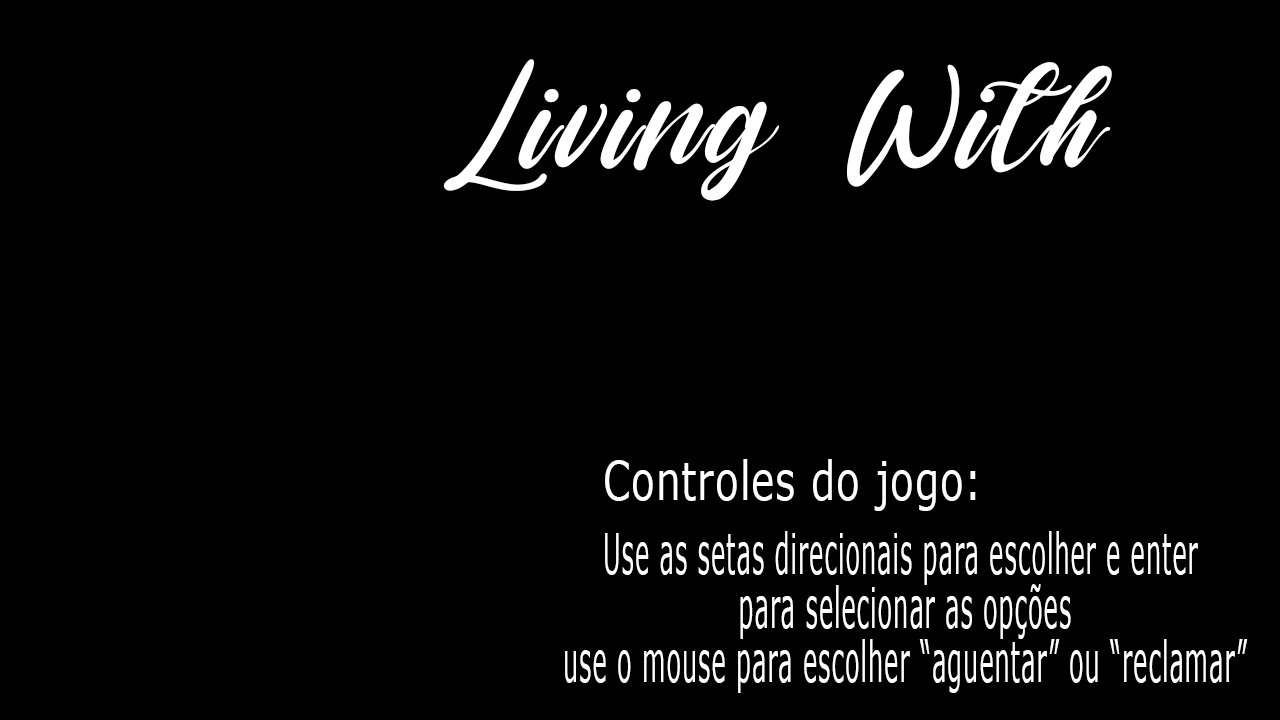
<style>
.page{position:relative;width:1280px;height:720px;background:#000000}
.page>*{position:absolute;margin:0}
.t1{font:202.5px "vagnotie";letter-spacing:0.029em;color:#ffffff}
.t2{font:54px "Verdana";letter-spacing:0.029em;color:#ffffff;scale:0.71 1}
.t3{font:56.4px "Verdana";letter-spacing:0.029em;color:#ffffff;scale:0.43 1}
</style>
<div class="page">
<p class="t1" style="left:443px;top:59px;width:669px;height:142px">Living With</p>
<p class="t2" style="left:605px;top:459px;width:371px;height:52px">Controles do jogo:</p>
<p class="t3" style="left:565px;top:531px;width:683px;height:162px;text-align:center">Use as setas direcionais para escolher e enter <br>para selecionar as opções<br>use o mouse para escolher “aguentar” ou “reclamar”</p>
</div>
